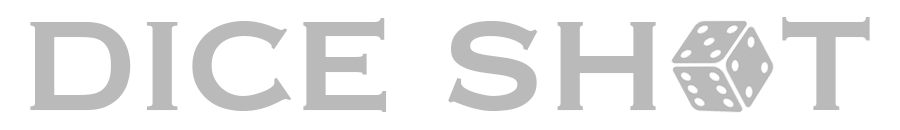
<style>
.page{position:relative;width:900px;height:130px;background:#ffffff}
.page>*{position:absolute;margin:0}
.t1{font:200px "Copperplate";letter-spacing:-0.05em;color:#bababa}
</style>
<div class="page">
<p class="t1" style="left:30px;top:17px;width:840px;height:95px">dice sh  t</p>
</div>
